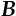
<style>
.page{position:relative;width:16px;height:16px;background:#ffffff}
.page>*{position:absolute;margin:0}
.t1{font:22px "BookAntiqua-BoldItalic";color:#000000}
</style>
<div class="page">
<p class="t1" style="left:1px;top:1px;width:14px;height:15px">B</p>
</div>
